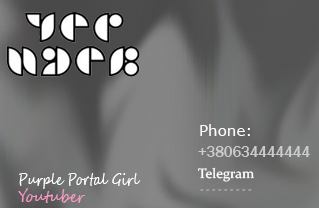
<style>
.page{position:relative;width:319px;height:208px}
.page>*{position:absolute;margin:0}
.t1{font:14.9px "Verdana";color:#ffffff}
.t2{font:15.8px "FranklinGothic-Medium";color:#cccccc;scale:0.93 1}
.t3{font:15.8px "SegoeScript";color:#ffffff;scale:0.76 1}
.t4{font:13.7px "Constantia";color:#ffffff}
.t5{font:15.6px "SegoeScript";color:#f49ac1;scale:0.89 1}
.t6{font:18.8px "SegoeScript";color:#a1a1a1;scale:1.27 1}
</style>
<div class="page">
<p class="t1" style="left:200px;top:124px;width:50px;height:12px">Phone:</p>
<p class="t2" style="left:198px;top:146px;width:112px;height:11px">+380634444444</p>
<p class="t3" style="left:19px;top:173px;width:122px;height:16px">Purple Portal Girl</p>
<p class="t4" style="left:198px;top:167px;width:56px;height:15px">Telegram</p>
<p class="t5" style="left:18px;top:188px;width:68px;height:15px">Youtuber</p>
<p class="t6" style="left:200px;top:189px;width:52px;height:2px">.........</p>
</div>
